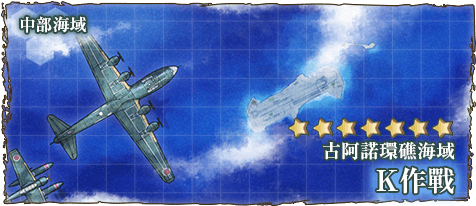
<style>
.page{position:relative;width:476px;height:206px}
.page>*{position:absolute;margin:0}
.t1{font:17px "RyuminPr6N-ExBold";color:#ffffff}
.t2{font:19px "RyuminPro-ExBold";color:#ffffff}
.t3{font:28px "RyuminPro-ExBold";color:#ffffff}
</style>
<div class="page">
<p class="t1" style="left:20px;top:16px;width:66px;height:17px">中部海域</p>
<p class="t2" style="left:323px;top:141px;width:132px;height:19px">古阿諾環礁海域</p>
<p class="t3" style="left:376px;top:167px;width:79px;height:27px">K作戰</p>
</div>
